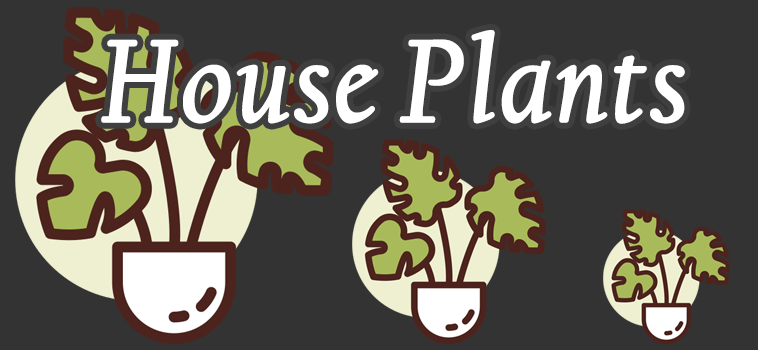
<style>
.page{position:relative;width:758px;height:350px;background:#333333}
.page>*{position:absolute;margin:0}
.t1{font:120px "CalifornianFB-Italic";color:#ffffff;font-weight:bold}
</style>
<div class="page">
<p class="t1" style="left:101px;top:30px;width:584px;height:94px">House Plants</p>
</div>
